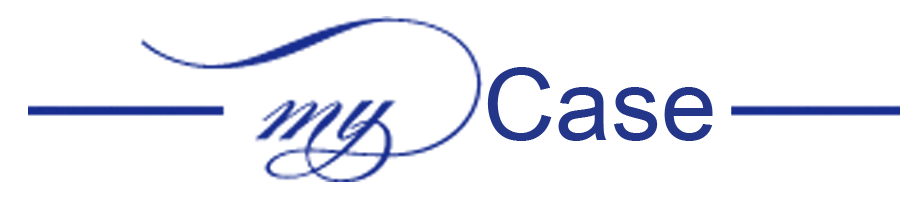
<style>
.page{position:relative;width:924px;height:199px;background:#ffffff}
.page>*{position:absolute;margin:0}
.t1{font:100px "ArialMT";color:#24368a}
</style>
<div class="page">
<p class="t1" style="left:487px;top:67px;width:226px;height:74px">Case</p>
</div>
